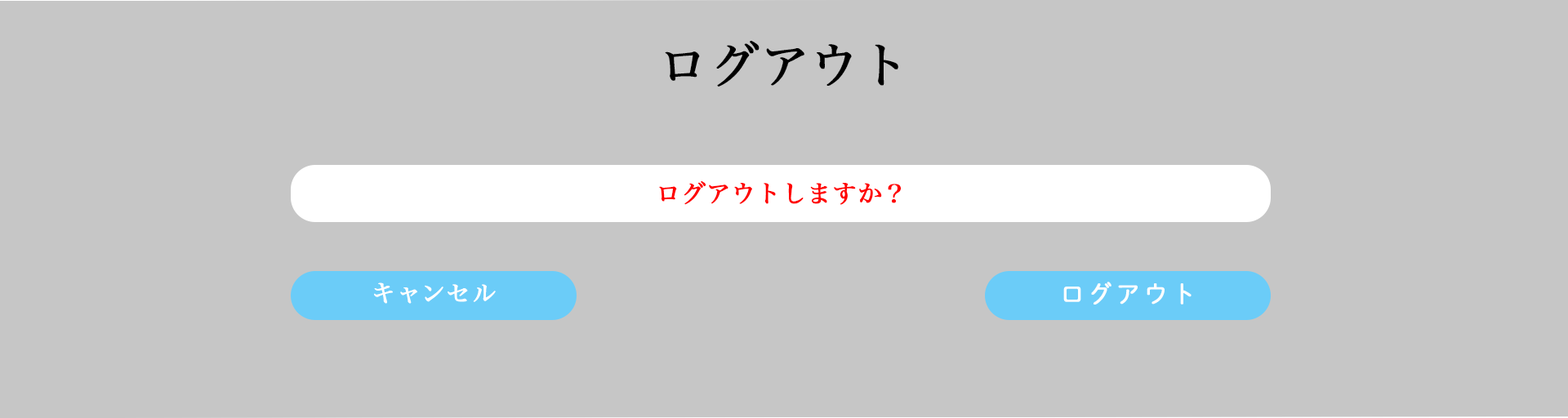
<style>
.page{position:relative;width:1568px;height:418px;background:#c6c6c6}
.page>*{position:absolute;margin:0}
.t1{font:49px "HiraMinPro-W3";color:#000000;font-weight:bold}
.t2{font:24.5px "HiraMinPro-W3";color:#ff0000;font-weight:bold}
.t3{font:24.5px "DNPShueiMGoStd-L";color:#fefefe;font-weight:bold}
.t4{font:24.5px "HiraMinPro-W3";color:#ffffff;font-weight:bold}
</style>
<div class="page">
<p class="t1" style="left:665px;top:41px;width:233px;height:46px">ログアウト</p>
<p class="t2" style="left:659px;top:181px;width:242px;height:24px">ログアウトしますか？</p>
<p class="t3" style="left:1063px;top:282px;width:129px;height:23px">ログアウト</p>
<p class="t4" style="left:374px;top:283px;width:122px;height:21px">キャンセル</p>
</div>
